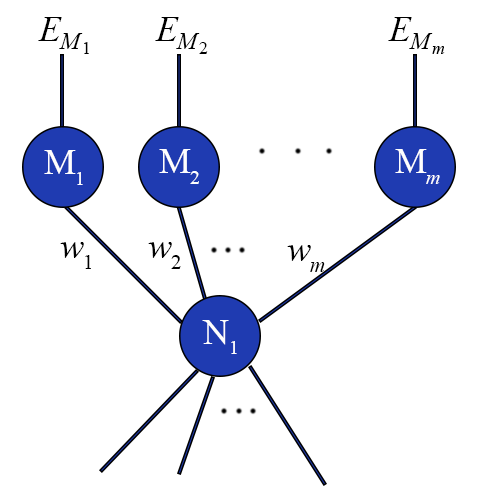
<style>
.page{position:relative;width:482px;height:494px;background:#ffffff}
.page>*{position:absolute;margin:0}
.t1{font:36px "TimesNewRomanPS-ItalicMT";color:#000000}
.t2{font:24px "TimesNewRomanPS-ItalicMT";color:#000000}
.t3{font:18px "TimesNewRomanPSMT";color:#000000}
.t4{font:18px "TimesNewRomanPS-ItalicMT";color:#000000}
.t5{font:36px "TimesNewRomanPSMT";color:#fefefe}
.t6{font:20px "TimesNewRomanPSMT";color:#fefefe}
.t7{font:20px "TimesNewRomanPS-ItalicMT";color:#fefefe}
.t8{font:21px "TimesNewRomanPSMT";color:#000000}
.t9{font:21px "TimesNewRomanPS-ItalicMT";color:#000000}
</style>
<div class="page">
<p class="t1" style="left:38px;top:17px;width:24px;height:24px">E</p>
<p class="t1" style="left:155px;top:17px;width:24px;height:24px">E</p>
<p class="t1" style="left:388px;top:17px;width:24px;height:24px">E</p>
<p class="t2" style="left:59px;top:33px;width:24px;height:16px">M</p>
<p class="t2" style="left:176px;top:33px;width:24px;height:16px">M</p>
<p class="t2" style="left:409px;top:33px;width:24px;height:16px">M</p>
<p class="t3" style="left:84px;top:42px;width:5px;height:12px">1</p>
<p class="t3" style="left:199px;top:42px;width:9px;height:12px">2</p>
<p class="t4" style="left:432px;top:46px;width:13px;height:8px">m</p>
<p class="t5" style="left:44px;top:150px;width:32px;height:24px">M</p>
<p class="t5" style="left:159px;top:149px;width:32px;height:24px">M</p>
<p class="t5" style="left:395px;top:149px;width:32px;height:24px">M</p>
<p class="t6" style="left:77px;top:172px;width:6px;height:13px">1</p>
<p class="t6" style="left:190px;top:171px;width:9px;height:13px">2</p>
<p class="t7" style="left:426px;top:175px;width:14px;height:9px">m</p>
<p class="t1" style="left:60px;top:242px;width:24px;height:16px">w</p>
<p class="t1" style="left:148px;top:242px;width:24px;height:16px">w</p>
<p class="t1" style="left:287px;top:245px;width:24px;height:16px">w</p>
<p class="t8" style="left:85px;top:255px;width:6px;height:14px">1</p>
<p class="t8" style="left:171px;top:255px;width:10px;height:14px">2</p>
<p class="t9" style="left:310px;top:262px;width:15px;height:10px">m</p>
<p class="t5" style="left:202px;top:320px;width:27px;height:25px">N</p>
<p class="t6" style="left:231px;top:341px;width:6px;height:13px">1</p>
</div>
